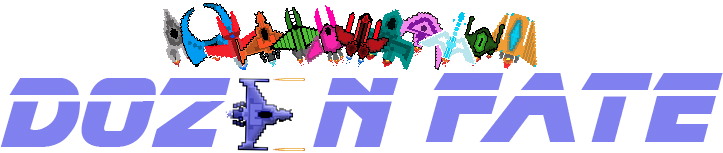
<style>
.page{position:relative;width:723px;height:153px;background:#ffffff}
.page>*{position:absolute;margin:0}
.t1{font:100px "BladeRunnerMovieFont";color:#8c77f3}
</style>
<div class="page">
<p class="t1" style="left:0px;top:78px;width:231px;height:69px">doz</p>
<p class="t1" style="left:313px;top:78px;width:86px;height:69px">N</p>
<p class="t1" style="left:425px;top:73px;width:298px;height:69px">fatE</p>
</div>
